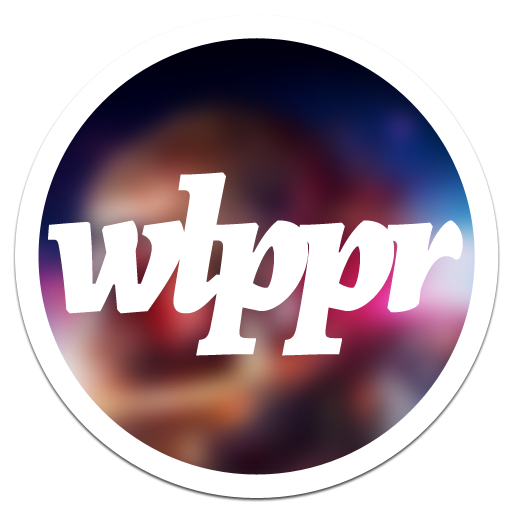
<style>
.page{position:relative;width:512px;height:512px;background:#ffffff}
.page>*{position:absolute;margin:0}
.t1{font:186.7px "Alegreya-BlackItalic";letter-spacing:-0.076em;color:#ffffff}
</style>
<div class="page">
<p class="t1" style="left:48px;top:172px;width:415px;height:184px">wlppr</p>
</div>
